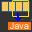
<style>
.page{position:relative;width:32px;height:32px;background:#333333}
.page>*{position:absolute;margin:0}
.t1{font:9px "ArialMT"}
</style>
<div class="page">
<p class="t1" style="left:10px;top:22px;width:19px;height:7px">Java</p>
</div>
